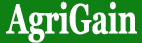
<style>
.page{position:relative;width:142px;height:43px;background:#0f8013}
.page>*{position:absolute;margin:0}
.t1{font:41.8px "Georgia-Bold";color:#ffffff;scale:0.67 1}
</style>
<div class="page">
<p class="t1" style="left:6px;top:1px;width:131px;height:42px">AgriGain</p>
</div>
